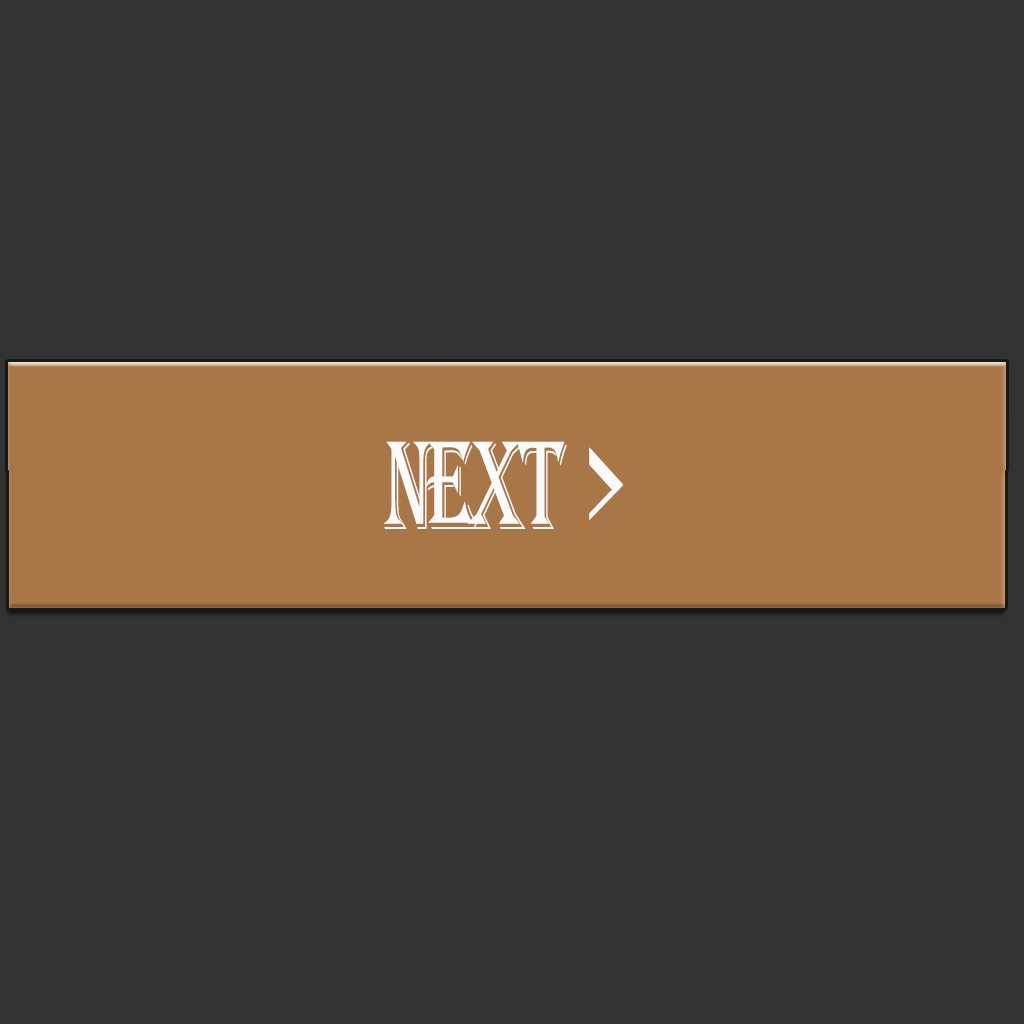
<style>
.page{position:relative;width:1024px;height:1024px;background:#333333}
.page>*{position:absolute;margin:0}
.t1{font:130.4px "Algerian";letter-spacing:-0.08em;color:#fafafa;scale:0.61 1}
</style>
<div class="page">
<p class="t1" style="left:383px;top:441px;width:240px;height:88px">NEXT  &gt;</p>
</div>
